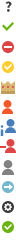
<style>
.page{position:relative;width:16px;height:240px;background:#ffffff}
.page>*{position:absolute;margin:0}
.t1{font:14px "BrandonGrotesque-Black";color:#3a3a3a}
.t2{font:16px "BrandonGrotesque-Black";color:#487fba}
</style>
<div class="page">
<p class="t1" style="left:5px;top:1px;width:7px;height:11px">?</p>
<p class="t2" style="left:0px;top:125px;width:4px;height:11px">i</p>
</div>
